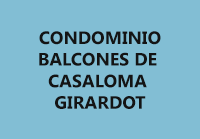
<style>
.page{position:relative;width:200px;height:139px;background:#82bed4}
.page>*{position:absolute;margin:0}
.t1{font:18px "SegoeUI-Bold";color:#141414}
</style>
<div class="page">
<p class="t1" style="left:39px;top:31px;width:122px;height:78px;text-align:center">CONDOMINIO<br>BALCONES DE <br>CASALOMA <br>GIRARDOT</p>
</div>
